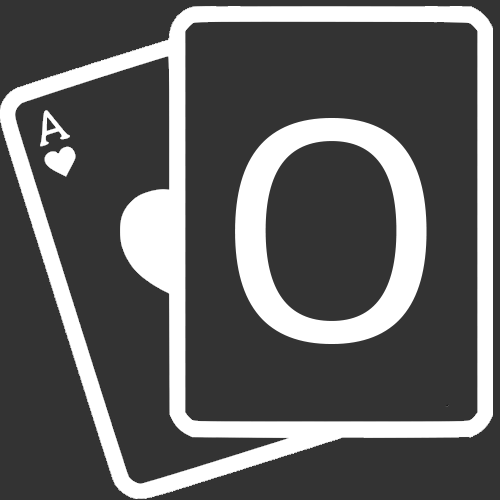
<style>
.page{position:relative;width:500px;height:500px;background:#333333}
.page>*{position:absolute;margin:0}
.t1{font:500px "SB-Modern";color:#ffffff}
</style>
<div class="page">
<p class="t1" style="left:235px;top:117px;width:192px;height:227px">0</p>
</div>
